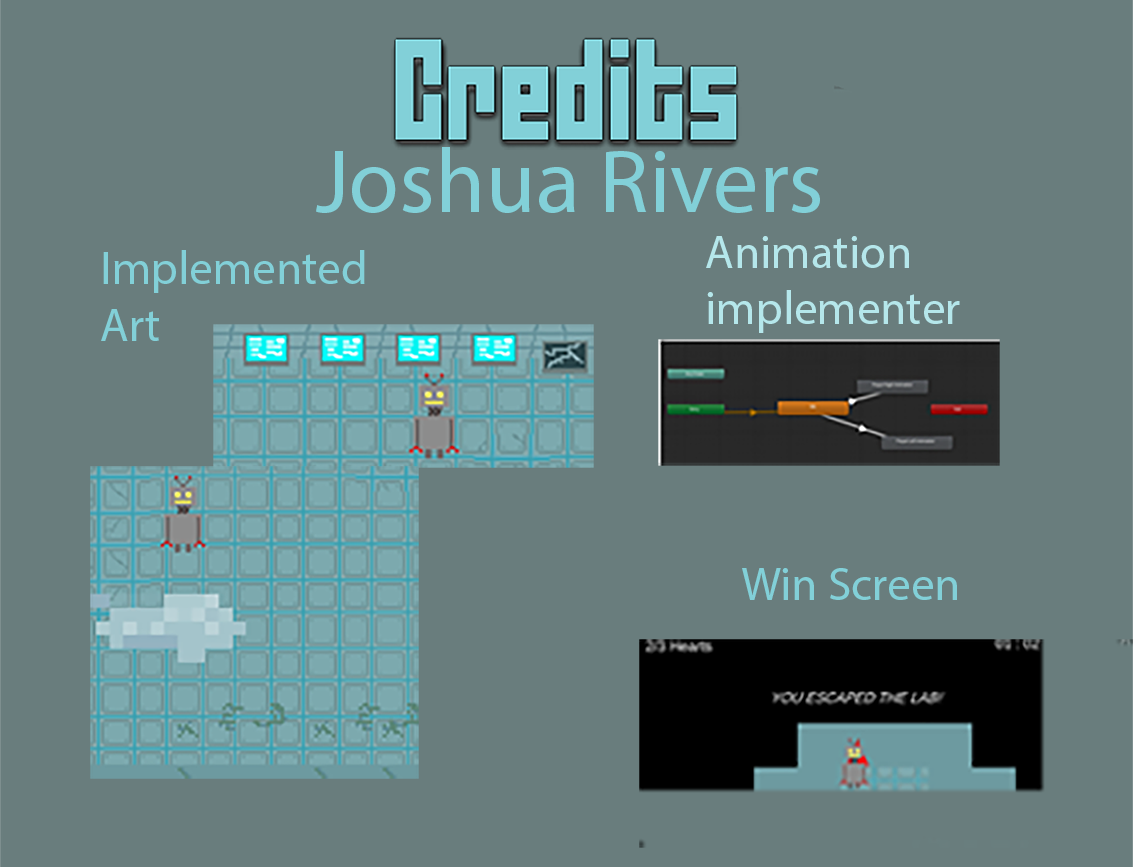
<style>
.page{position:relative;width:1133px;height:867px;background:#697d7d}
.page>*{position:absolute;margin:0}
.t1{font:90.8px "MyriadPro-Regular";letter-spacing:0.001em;color:#82d0d8}
.t2{font:47.2px "MyriadPro-Regular";color:#b5e7eb}
.t3{font:47.2px "MyriadPro-Regular";color:#82d0d8}
</style>
<div class="page">
<p class="t1" style="left:316px;top:147px;width:504px;height:66px">Joshua Rivers</p>
<p class="t2" style="left:706px;top:236px;width:254px;height:97px">Animation implementer</p>
<p class="t3" style="left:101px;top:250px;width:264px;height:91px">Implemented Art</p>
<p class="t3" style="left:742px;top:568px;width:215px;height:32px">Win Screen</p>
</div>
